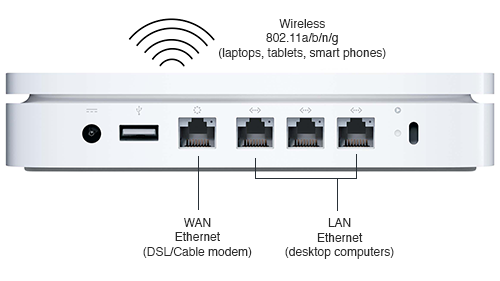
<style>
.page{position:relative;width:500px;height:281px;background:#ffffff}
.page>*{position:absolute;margin:0}
.t1{font:12px "Helvetica";color:#2c2c2c}
</style>
<div class="page">
<p class="t1" style="left:219px;top:19px;width:167px;height:41px;text-align:center">Wireless<br>802.11a/b/n/g<br>(laptops, tablets, smart phones)</p>
<p class="t1" style="left:143px;top:218px;width:109px;height:40px;text-align:center">WAN<br>Ethernet<br>(DSL/Cable modem)</p>
<p class="t1" style="left:285px;top:218px;width:109px;height:41px;text-align:center">LAN<br>Ethernet<br>(desktop computers)</p>
</div>
